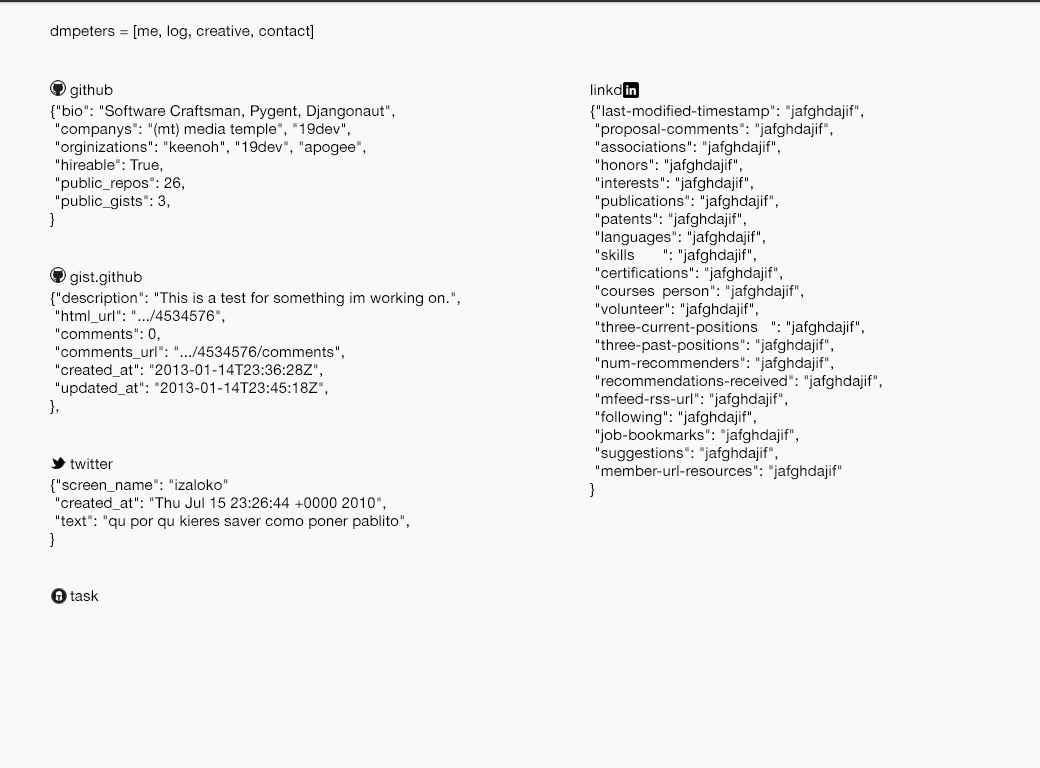
<style>
.page{position:relative;width:1040px;height:768px;background:#f9f9f9}
.page>*{position:absolute;margin:0}
.t1{font:15px "HelveticaNeue";letter-spacing:0.01em;color:#000000}
</style>
<div class="page">
<p class="t1" style="left:50px;top:25px;width:263px;height:15px">dmpeters = [me, log, creative, contact]</p>
<p class="t1" style="left:70px;top:84px;width:43px;height:15px">github</p>
<p class="t1" style="left:591px;top:84px;width:43px;height:11px">linkdin</p>
<p class="t1" style="left:50px;top:105px;width:345px;height:122px">{"bio": "Software Craftsman, Pygent, Djangonaut",<br> "companys": "(mt) media temple", "19dev",<br> "orginizations": "keenoh", "19dev", "apogee",<br> "hireable": True,<br> "public_repos": 26,<br> "public_gists": 3,<br>}</p>
<p class="t1" style="left:590px;top:105px;width:292px;height:392px">{"last-modified-timestamp": "jafghdajif",<br> "proposal-comments": "jafghdajif",<br> "associations": "jafghdajif",<br> "honors": "jafghdajif",<br> "interests": "jafghdajif",<br> "publications": "jafghdajif",<br> "patents": "jafghdajif",<br> "languages": "jafghdajif",<br> "skills ": "jafghdajif",<br> "certifications": "jafghdajif",<br> "courses person": "jafghdajif",<br> "volunteer": "jafghdajif",<br> "three-current-positions ": "jafghdajif",<br> "three-past-positions": "jafghdajif",<br> "num-recommenders": "jafghdajif",<br> "recommendations-received": "jafghdajif",<br> "mfeed-rss-url": "jafghdajif",<br> "following": "jafghdajif",<br> "job-bookmarks": "jafghdajif",<br> "suggestions": "jafghdajif",<br> "member-url-resources": "jafghdajif"<br>}</p>
<p class="t1" style="left:70px;top:271px;width:72px;height:15px">gist.github</p>
<p class="t1" style="left:50px;top:292px;width:410px;height:122px">{"description": "This is a test for something im working on.",<br> "html_url": ".../4534576",<br> "comments": 0,<br> "comments_url": ".../4534576/comments",<br> "created_at": "2013-01-14T23:36:28Z",<br> "updated_at": "2013-01-14T23:45:18Z",<br>},</p>
<p class="t1" style="left:70px;top:458px;width:43px;height:11px">twitter</p>
<p class="t1" style="left:50px;top:479px;width:359px;height:68px">{"screen_name": "izaloko"<br> "created_at": "Thu Jul 15 23:26:44 +0000 2010",<br> "text": "qu por qu kieres saver como poner pablito",<br>}</p>
<p class="t1" style="left:70px;top:590px;width:29px;height:11px">task</p>
</div>
